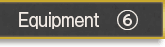
<style>
.page{position:relative;width:165px;height:47px;background:#3e3e3e}
.page>*{position:absolute;margin:0}
.t1{font:18px "GothicMB101Pro-Regular";letter-spacing:-0.04em;color:#f2ebe5;scale:0.9 1}
</style>
<div class="page">
<p class="t1" style="left:19px;top:12px;width:80px;height:17px">Equipment</p>
</div>
